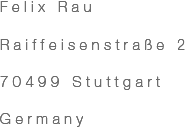
<style>
.page{position:relative;width:186px;height:127px;background:#ffffff}
.page>*{position:absolute;margin:0}
.t1{font:14.7px/37.3px "HelveticaNeueLTStd-Th";letter-spacing:0.31em;color:#6a6a6a}
</style>
<div class="page">
<p class="t1" style="left:0px;top:1px;width:185px;height:126px">Felix Rau<br>Raiffeisenstraße 2<br>70499 Stuttgart<br>Germany</p>
<p class="t1" style="left:0px;top:1px;width:185px;height:126px">Felix Rau<br>Raiffeisenstraße 2<br>70499 Stuttgart<br>Germany</p>
</div>
